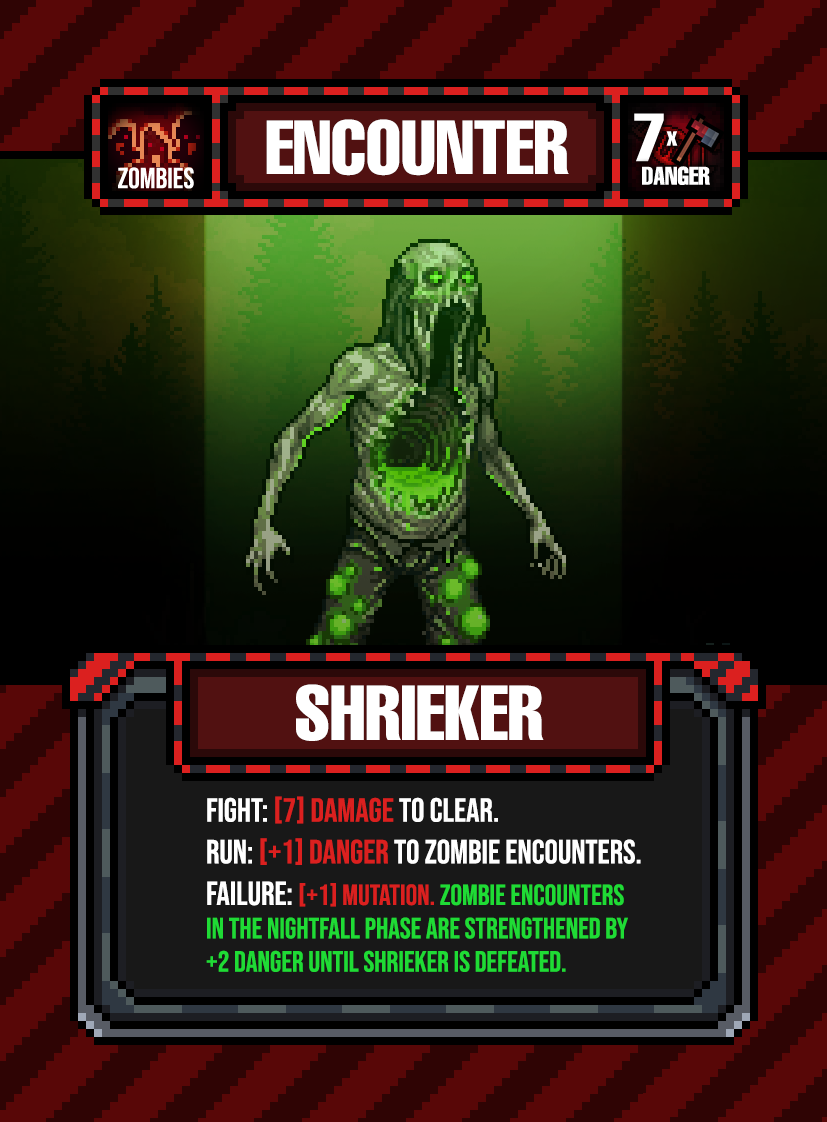
<style>
.page{position:relative;width:827px;height:1122px}
.page>*{position:absolute;margin:0}
.t1{font:75px "HelveticaLTPro-Compressed";color:#ffffff}
.t2{font:76.2px "HelveticaLTPro-Compressed";color:#ffffff}
.t3{font:29.2px/33.3px "BebasNeue-Regular";color:#1fdb35}
.t4{font:33.3px/41.7px "BebasNeue-Regular";color:#ffffff}
.t5{font:33.3px/41.7px "BebasNeue-Regular";color:#db201f}
.t6{font:33.3px/33.3px "BebasNeue-Regular";color:#db201f}
.t7{font:33.3px/33.3px "BebasNeue-Regular";color:#ffffff}
.t8{font:29.2px/41.7px "BebasNeue-Regular";color:#db201f}
</style>
<div class="page">
<p class="t1" style="left:266px;top:119px;width:303px;height:57px">ENCOUNTER</p>
<p class="t2" style="left:296px;top:684px;width:248px;height:57px">SHRIEKER</p>
<p class="t3" style="left:206px;top:796px;width:435px;height:176px"><span class="t4">FIGHT: </span><span class="t5">[7] Damage</span><span class="t4"> to clear.<br>RUN: </span><span class="t6">[+1] Danger </span><span class="t7">to zombie encounters.<br></span><span class="t4">failure: </span><span class="t8">[+1] MUTATION. </span>Zombie Encounters in the Nightfall phase are strengthened by +2 Danger until Shrieker is defeated.</p>
</div>
